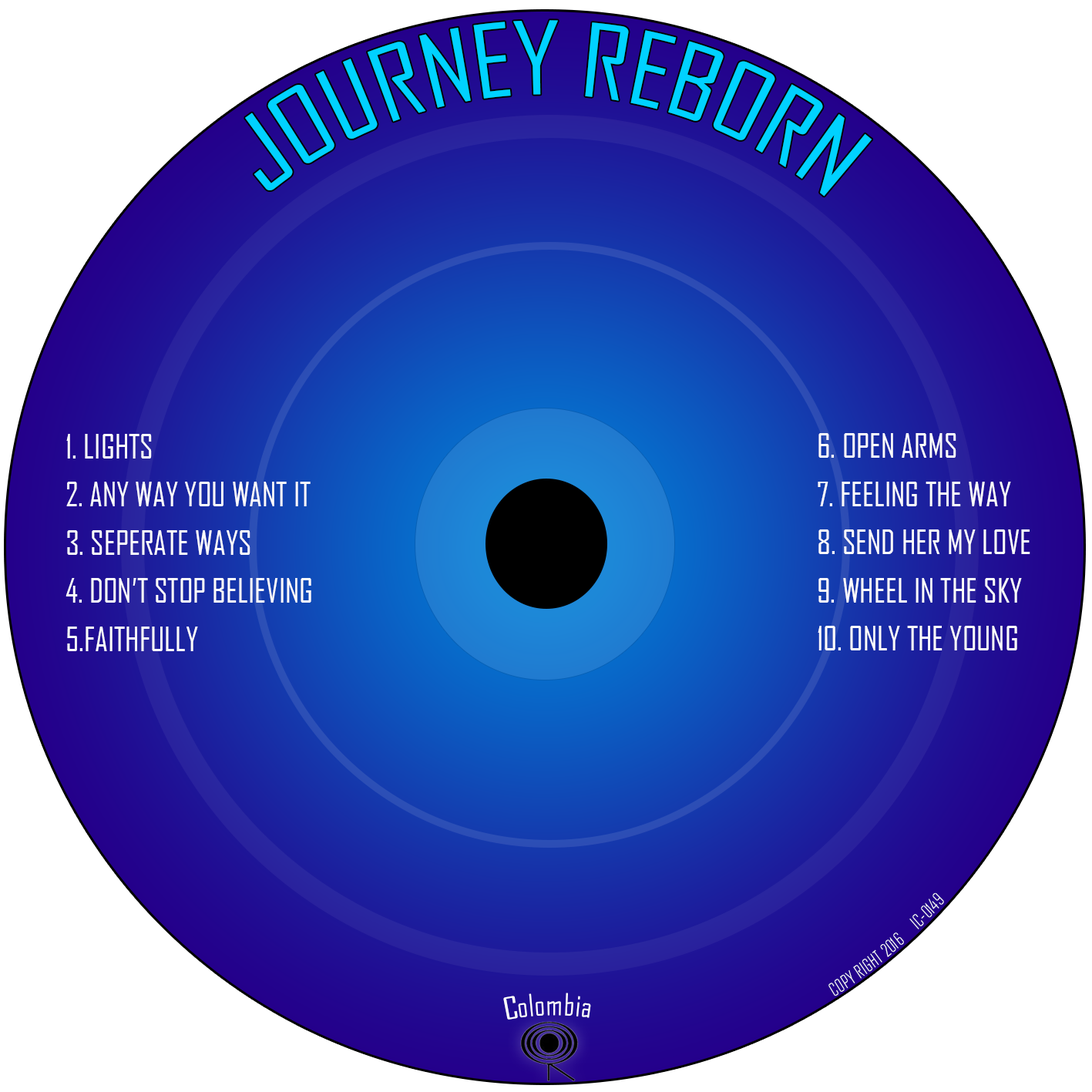
<style>
.page{position:relative;width:1092px;height:1092px;background:#ffffff}
.page>*{position:absolute;margin:0}
.t1{font:96.3px "AgencyFB-Reg";color:#00d2ff}
.t2{font:32.1px/48.2px "AgencyFB-Reg";color:#fcfcfc}
.t3{font:28.9px "AgencyFB-Reg";color:#ffffff}
</style>
<div class="page">
<p class="t1" style="left:245px;top:20px;width:627px;height:177px">JOURNEY REBORN</p>
<p class="t2" style="left:66px;top:434px;width:245px;height:217px">1. LIGHTS<br>2. ANY WAY YOU WANT IT<br>3. SEPERATE WAYS<br>4. DON’T STOP BELIEVING<br>5.FAITHFULLY</p>
<p class="t2" style="left:818px;top:433px;width:212px;height:217px">6. OPEN ARMS<br>7. FEELING THE WAY<br>8. SEND HER MY LOVE<br>9. WHEEL IN THE SKY<br>10. ONLY THE YOUNG</p>
<p class="t3" style="left:503px;top:993px;width:88px;height:27px;rotate:-1deg">Colombia</p>
</div>
